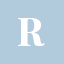
<style>
.page{position:relative;width:64px;height:64px;background:#b1cbdd}
.page>*{position:absolute;margin:0}
.t1{font:38.9px "PlayfairDisplay-Bold";color:#ffffff}
</style>
<div class="page">
<p class="t1" style="left:18px;top:18px;width:27px;height:28px">R</p>
</div>
